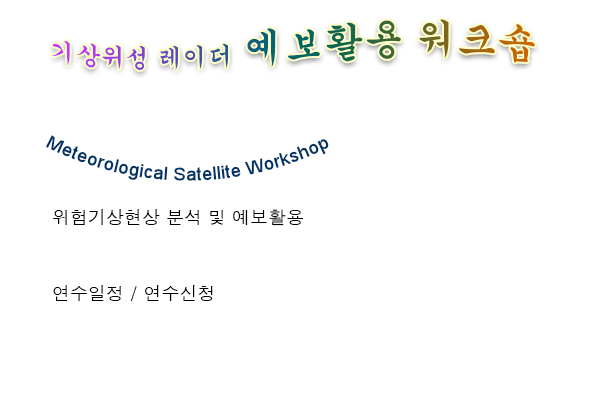
<style>
.page{position:relative;width:600px;height:400px;background:#ffffff}
.page>*{position:absolute;margin:0}
.t1{font:25px "Gungsuh"}
.t2{font:40px "Gungsuh"}
.t3{font:18px/295px "ArialMT";color:#003366}
.t4{font:18px "Dotum";color:#000000}
</style>
<div class="page">
<p class="t1" style="left:52px;top:19px;width:483px;height:51px">기상위성 레이더 <span class="t2">예보활용 워크숍</span></p>
<p class="t3" style="left:45px;top:135px;width:284px;height:46px">Meteorological Satellite Workshop</p>
<p class="t4" style="left:53px;top:209px;width:250px;height:17px">위험기상현상 분석 및 예보활용</p>
<p class="t4" style="left:53px;top:285px;width:160px;height:17px">연수일정 / 연수신청</p>
</div>
